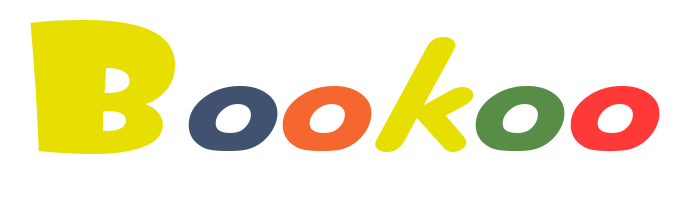
<style>
.page{position:relative;width:700px;height:200px;background:#ffffff}
.page>*{position:absolute;margin:0}
.t1{font:171.4px "ShowcardGothic-Reg";color:#e7df01;scale:1.34 1}
.t2{font:171.4px "HarlowSolid";color:#415271;scale:1.34 1}
.t3{font:171.4px "HarlowSolid";color:#f5672f;scale:1.34 1}
.t4{font:171.4px "HarlowSolid";color:#e7df01;scale:1.34 1}
.t5{font:171.4px "HarlowSolid";color:#588d47;scale:1.34 1}
.t6{font:171.4px "HarlowSolid";color:#ff3838;scale:1.34 1}
</style>
<div class="page">
<p class="t1" style="left:30px;top:19px;width:630px;height:135px">B<span class="t2">o</span><span class="t3">o</span><span class="t4">k</span><span class="t5">o</span><span class="t6">o</span></p>
</div>
